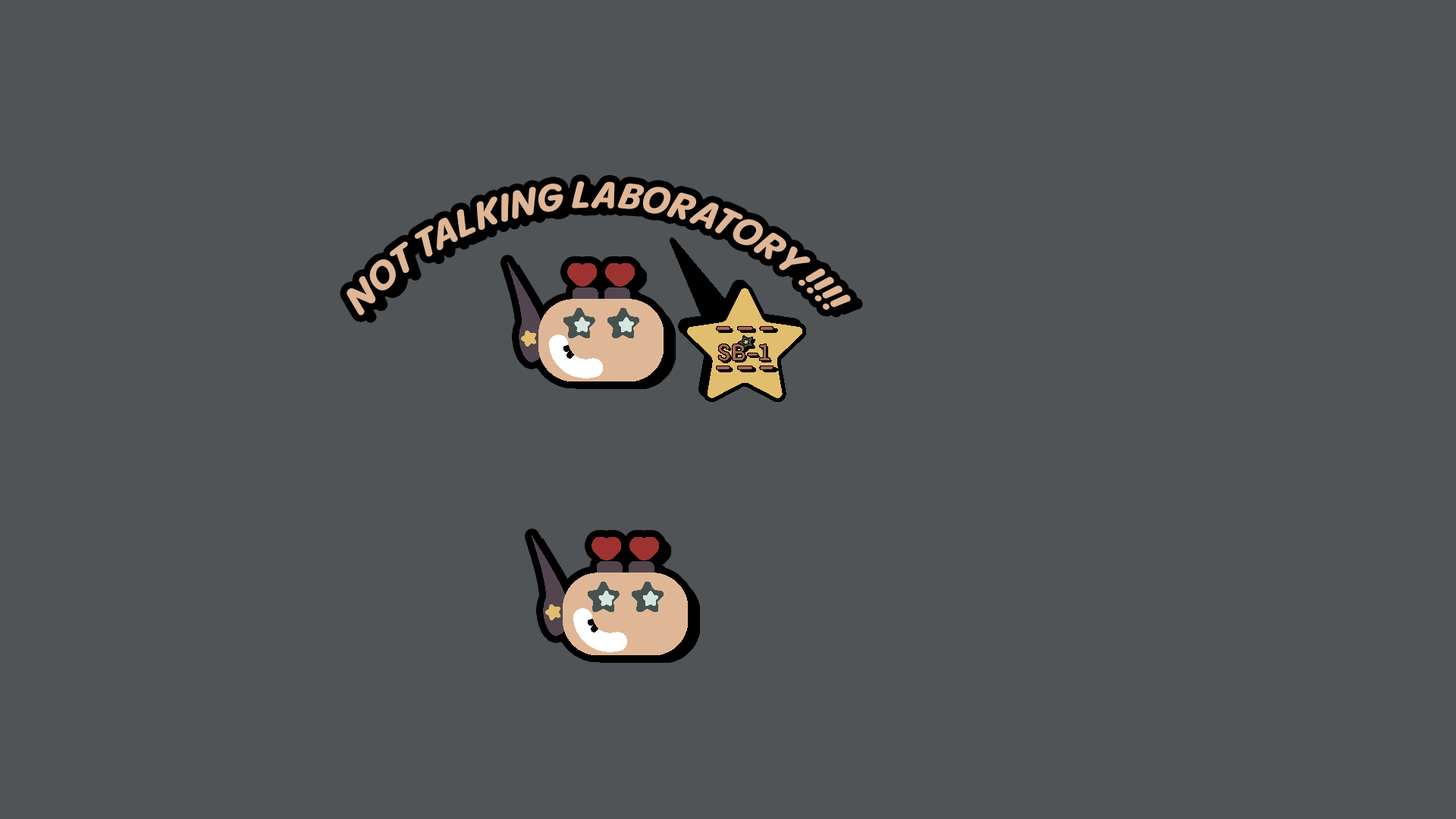
<style>
.page{position:relative;width:1456px;height:819px;background:#505456}
.page>*{position:absolute;margin:0}
.t1{font:36.4px "PPPangramSansRounded-NarrowExtraboldItalic";color:#dfb797}
</style>
<div class="page">
<p class="t1" style="left:347px;top:181px;width:504px;height:134px">NOT TALKING LABORATORY !!!!</p>
</div>
